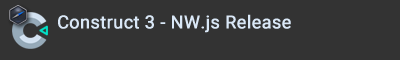
<style>
.page{position:relative;width:400px;height:60px;background:#333333}
.page>*{position:absolute;margin:0}
.t1{font:18px "Roboto-Regular";color:#dae8f7;font-weight:bold}
</style>
<div class="page">
<p class="t1" style="left:58px;top:14px;width:233px;height:19px">Construct 3 - NW.js Release</p>
</div>
